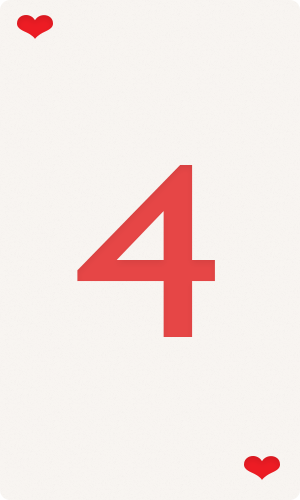
<style>
.page{position:relative;width:300px;height:500px;background:#f8f5f1}
.page>*{position:absolute;margin:0}
.t1{font:249.2px "GillSansMT";color:#e64646;scale:1.2 1}
</style>
<div class="page">
<p class="t1" style="left:77px;top:165px;width:138px;height:172px">4</p>
</div>
